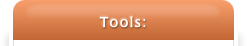
<style>
.page{position:relative;width:247px;height:46px}
.page>*{position:absolute;margin:0}
.t1{font:14px "LaudatioC";letter-spacing:0.1em;color:#ffffff}
</style>
<div class="page">
<p class="t1" style="left:100px;top:16px;width:46px;height:12px">Tools:</p>
</div>
